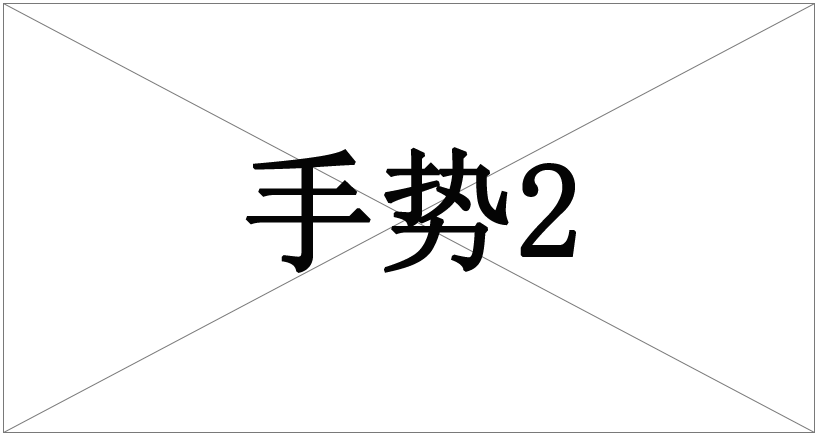
<style>
.page{position:relative;width:817px;height:435px;background:#ffffff}
.page>*{position:absolute;margin:0}
.t1{font:133.3px "SimSun";color:#040404;font-weight:bold}
</style>
<div class="page">
<p class="t1" style="left:245px;top:147px;width:331px;height:126px">手势2</p>
</div>
